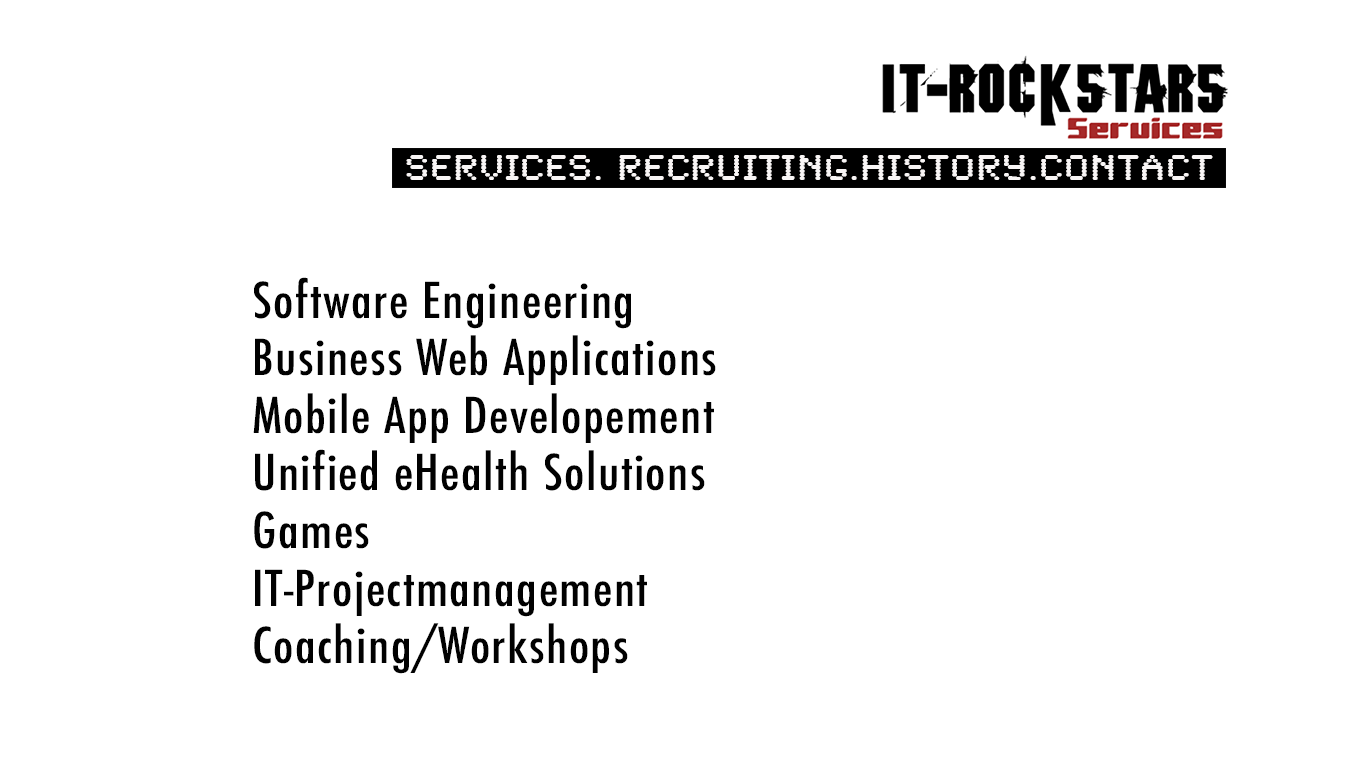
<style>
.page{position:relative;width:1366px;height:768px;background:#ffffff}
.page>*{position:absolute;margin:0}
.t1{font:36.9px "SynchroLET";letter-spacing:0.025em;color:#f8f5f5;scale:1.11 1}
.t2{font:48px "Futura-CondensedMedium";letter-spacing:0.025em;color:#010101;scale:1.1 1}
</style>
<div class="page">
<p class="t1" style="left:406px;top:155px;width:807px;height:25px">Services. Recruiting.history.contact</p>
<p class="t2" style="left:253px;top:277px;width:463px;height:397px">Software Engineering<br>Business Web Applications <br>Mobile App Developement <br>Unified eHealth Solutions<br>Games<br>IT-Projectmanagement<br>Coaching/Workshops</p>
</div>
